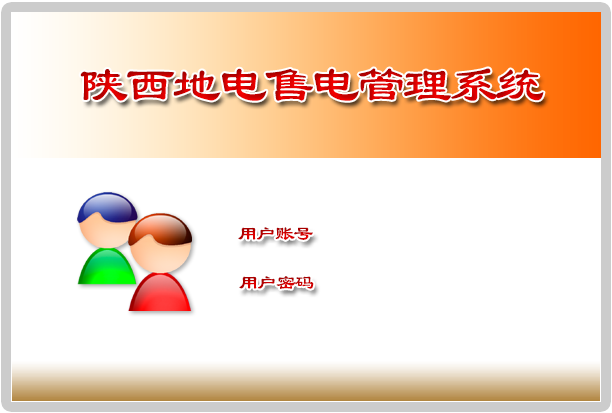
<style>
.page{position:relative;width:612px;height:413px;background:#ffffff}
.page>*{position:absolute;margin:0}
.t1{font:50px "LiSu";letter-spacing:-0.075em;text-transform:uppercase}
.t2{font:20px "LiSu";letter-spacing:-0.075em;text-transform:uppercase}
</style>
<div class="page">
<p class="t1" style="left:80px;top:68px;width:464px;height:33px">陕西地电售电管理系统</p>
<p class="t2" style="left:238px;top:227px;width:75px;height:13px">用户账号</p>
<p class="t2" style="left:239px;top:276px;width:75px;height:13px">用户密码</p>
</div>
